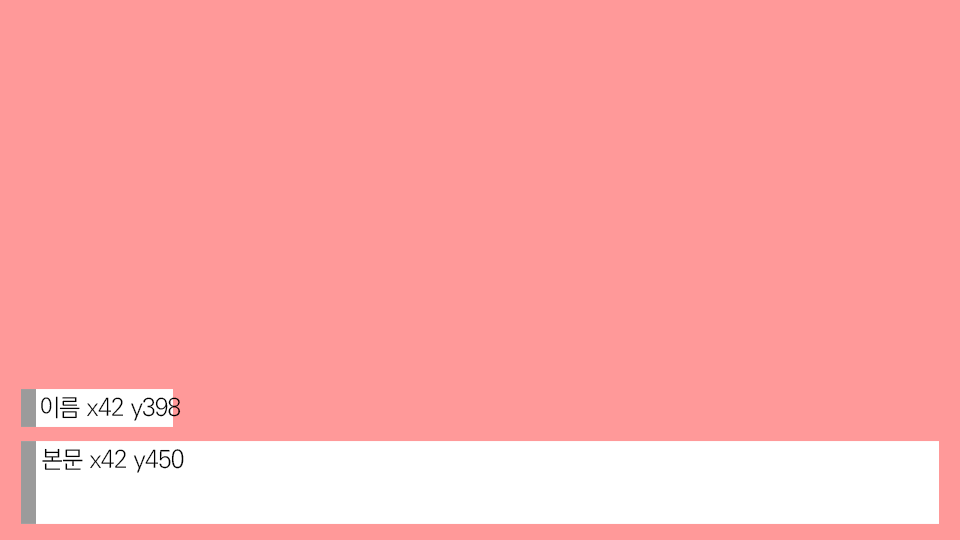
<style>
.page{position:relative;width:960px;height:540px;background:#ff9999}
.page>*{position:absolute;margin:0}
.t1{font:24px "KoPubWorldDotumLight";letter-spacing:-0.005em;color:#000000}
</style>
<div class="page">
<p class="t1" style="left:41px;top:396px;width:140px;height:25px">이름 x42 y398</p>
<p class="t1" style="left:42px;top:448px;width:142px;height:25px">본문 x42 y450</p>
</div>
